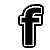
<style>
.page{position:relative;width:50px;height:50px;background:#ffffff}
.page>*{position:absolute;margin:0}
.t1{font:48px "Meiryo-Bold";letter-spacing:0.05em;color:#000000}
</style>
<div class="page">
<p class="t1" style="left:21px;top:7px;width:20px;height:38px">f</p>
</div>
